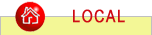
<style>
.page{position:relative;width:152px;height:35px;background:#f3f796}
.page>*{position:absolute;margin:0}
.t1{font:17px "ArialNarrow";letter-spacing:0.075em;color:#cf0c15;font-weight:bold}
</style>
<div class="page">
<p class="t1" style="left:73px;top:9px;width:52px;height:14px">LOCAL</p>
</div>
